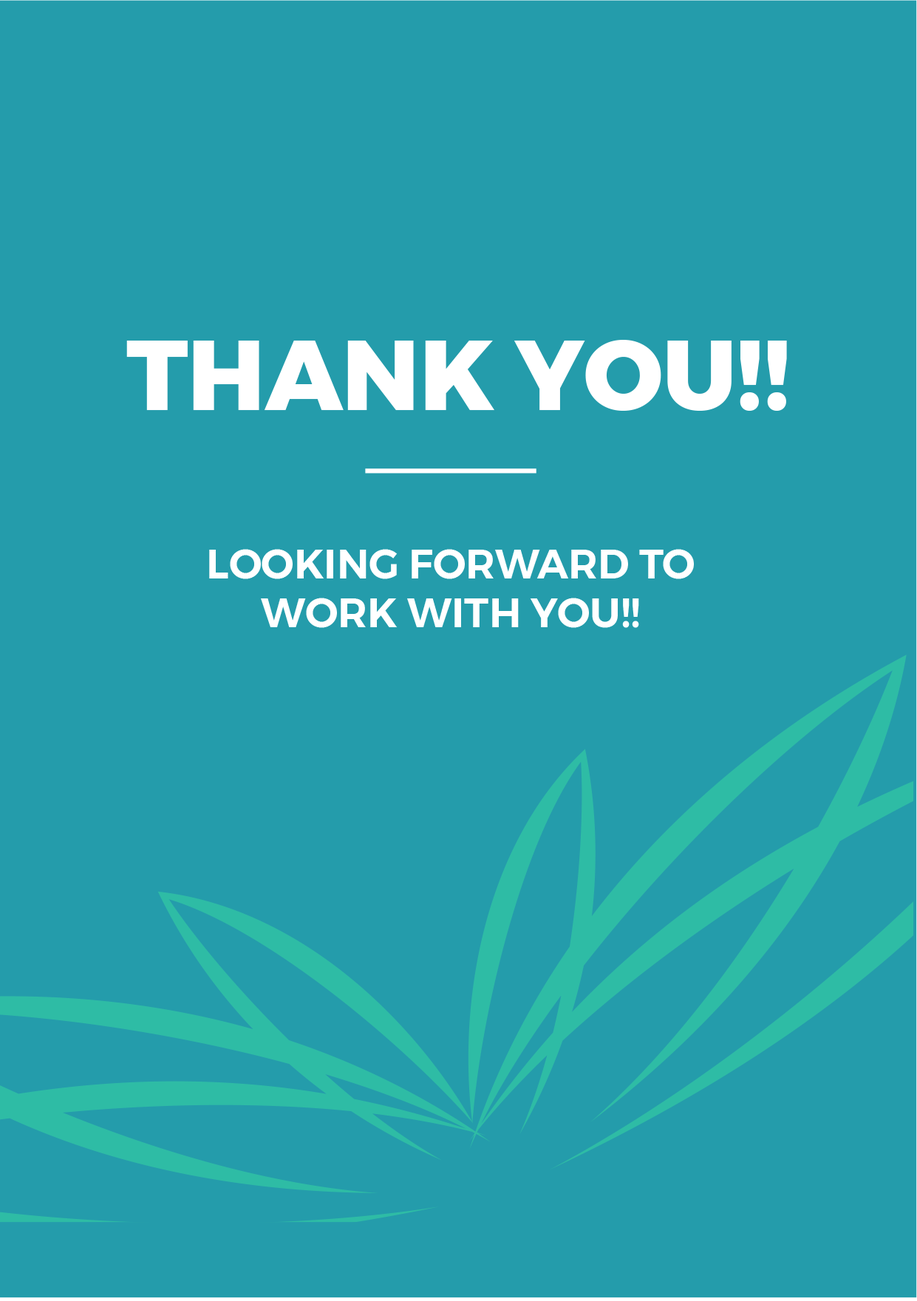
<style>
.page{position:relative;width:917px;height:1301px;background:#249cab}
.page>*{position:absolute;margin:0}
.t1{font:98.4px "Montserrat-ExtraBold";color:#ffffff;text-transform:uppercase}
.t2{font:40.8px "Montserrat-SemiBold";color:#ffffff;text-transform:uppercase}
</style>
<div class="page">
<p class="t1" style="left:126px;top:340px;width:661px;height:71px">Thank You!!</p>
<p class="t2" style="left:209px;top:549px;width:485px;height:79px;text-align:center">Looking forward to<br>work with you!!</p>
</div>
